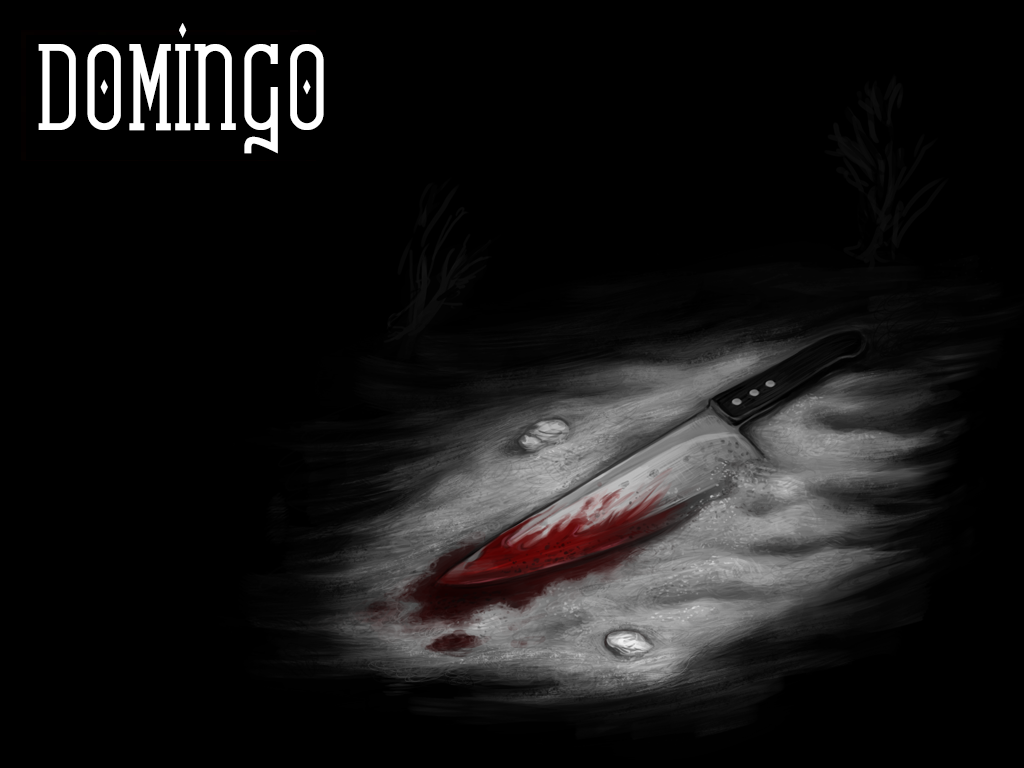
<style>
.page{position:relative;width:1024px;height:768px;background:#000000}
.page>*{position:absolute;margin:0}
.t1{font:132px "CatharsisRequiemBold";letter-spacing:-0.003em;color:#ffffff}
</style>
<div class="page">
<p class="t1" style="left:38px;top:23px;width:286px;height:131px">domingo</p>
</div>
